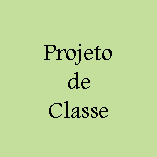
<style>
.page{position:relative;width:157px;height:157px;background:#c4df9b}
.page>*{position:absolute;margin:0}
.t1{font:24px "Andalus";color:#000000}
</style>
<div class="page">
<p class="t1" style="left:44px;top:44px;width:68px;height:74px;text-align:center">Projeto<br>de<br>Classe</p>
</div>
